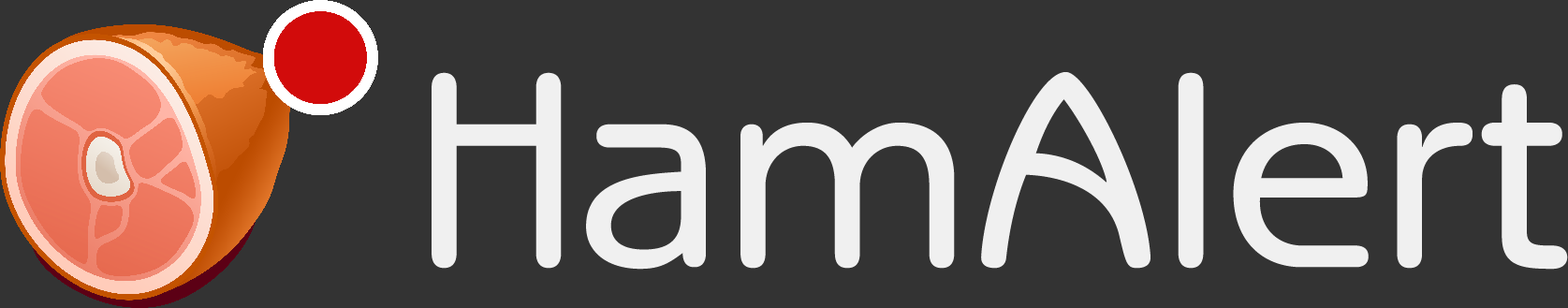
<style>
.page{position:relative;width:1568px;height:308px;background:#333333}
.page>*{position:absolute;margin:0}
.t1{font:280.8px "BenguiatGothic-Medium";color:#f0f0f0}
</style>
<div class="page">
<p class="t1" style="left:432px;top:72px;width:1136px;height:198px">HamAlert</p>
</div>
